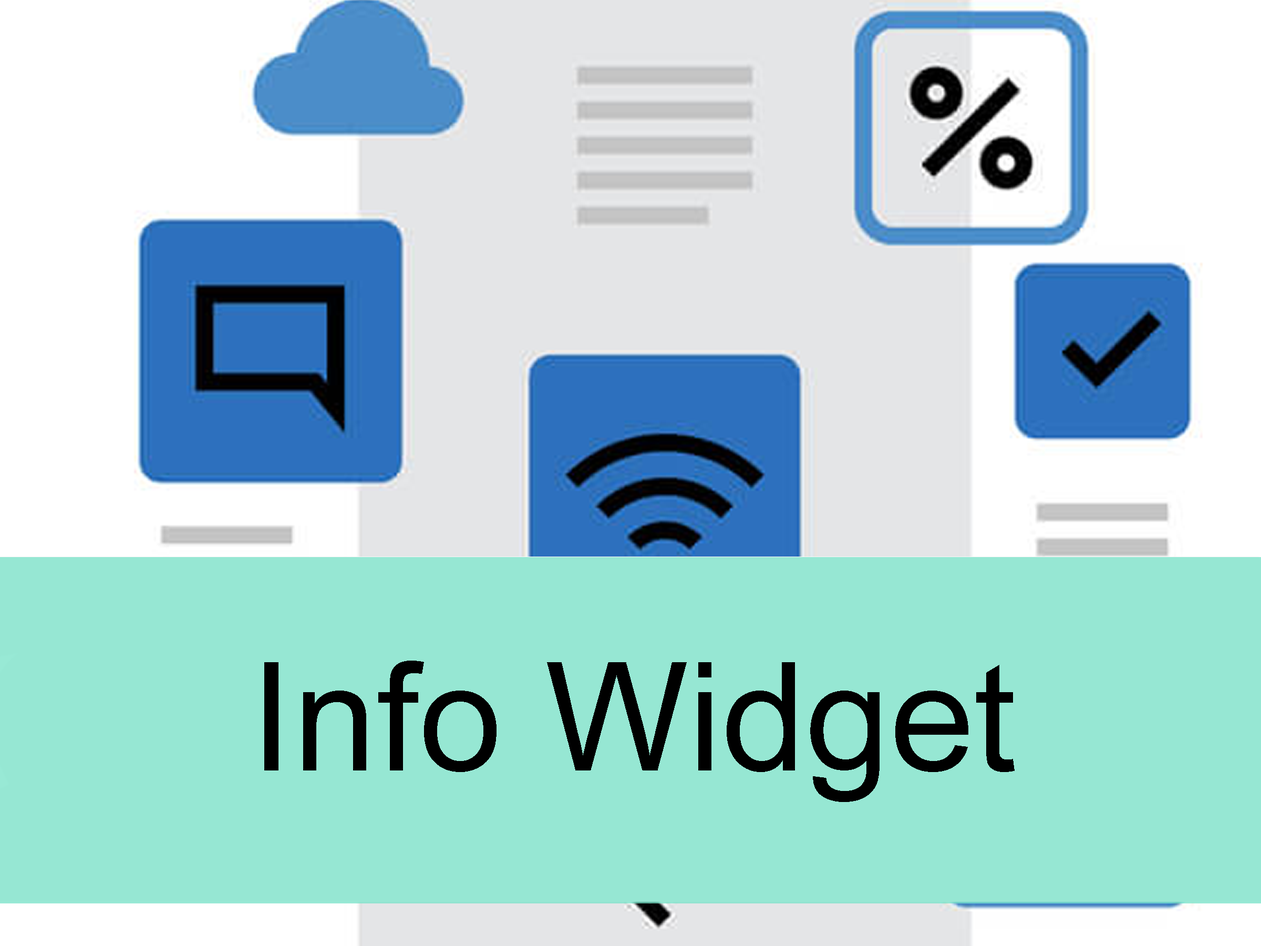
<style>
.page{position:relative;width:1261px;height:946px;background:#96e7d3}
.page>*{position:absolute;margin:0}
.t1{font:151.4px "ArialMT";color:#000000}
</style>
<div class="page">
<p class="t1" style="left:264px;top:660px;width:751px;height:142px">Info Widget</p>
</div>
